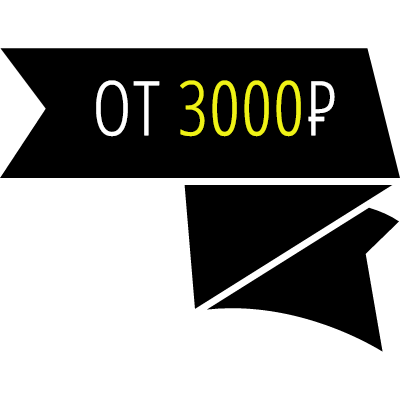
<style>
.page{position:relative;width:400px;height:400px;background:#ffffff}
.page>*{position:absolute;margin:0}
.t1{font:75px "OpenSansCondensed-Light";color:#eff216;font-weight:bold}
.t2{font:75px "OpenSansCondensed-Light";color:#ffffff;font-weight:bold}
</style>
<div class="page">
<p class="t1" style="left:96px;top:80px;width:239px;height:57px"><span class="t2">ОТ </span>3000<span class="t2">Р</span></p>
<p class="t2" style="left:308px;top:116px;width:17px;height:6px">-</p>
</div>
